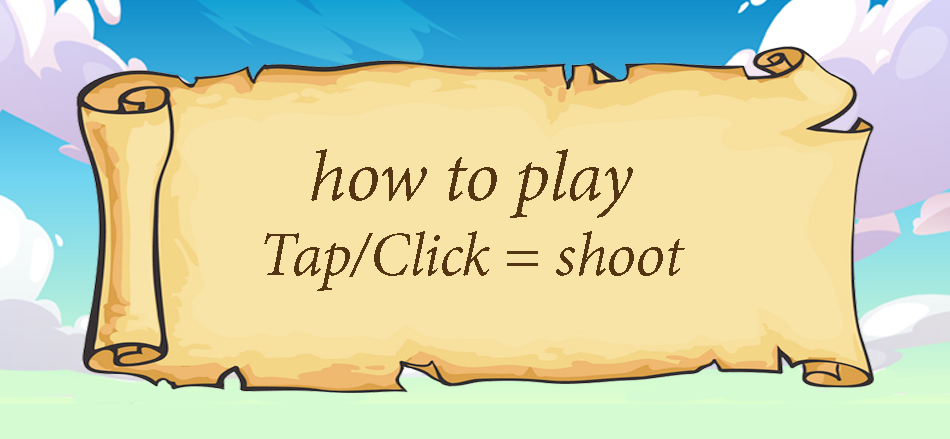
<style>
.page{position:relative;width:950px;height:439px;background:#f8e4a7}
.page>*{position:absolute;margin:0}
.t1{font:77.9px "AdobeDevanagari-Italic";color:#533413}
.t2{font:67.4px "AdobeDevanagari-Italic";color:#533413}
</style>
<div class="page">
<p class="t1" style="left:311px;top:149px;width:322px;height:69px">how to play</p>
<p class="t2" style="left:264px;top:231px;width:421px;height:60px">Tap/Click = shoot</p>
</div>
